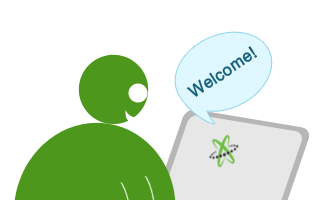
<style>
.page{position:relative;width:319px;height:200px;background:#ffffff}
.page>*{position:absolute;margin:0}
.t1{font:16.7px "ArialMT";color:#16617a;font-weight:bold}
</style>
<div class="page">
<p class="t1" style="left:187px;top:46px;width:70px;height:51px;rotate:-34deg">Welcome!</p>
</div>
